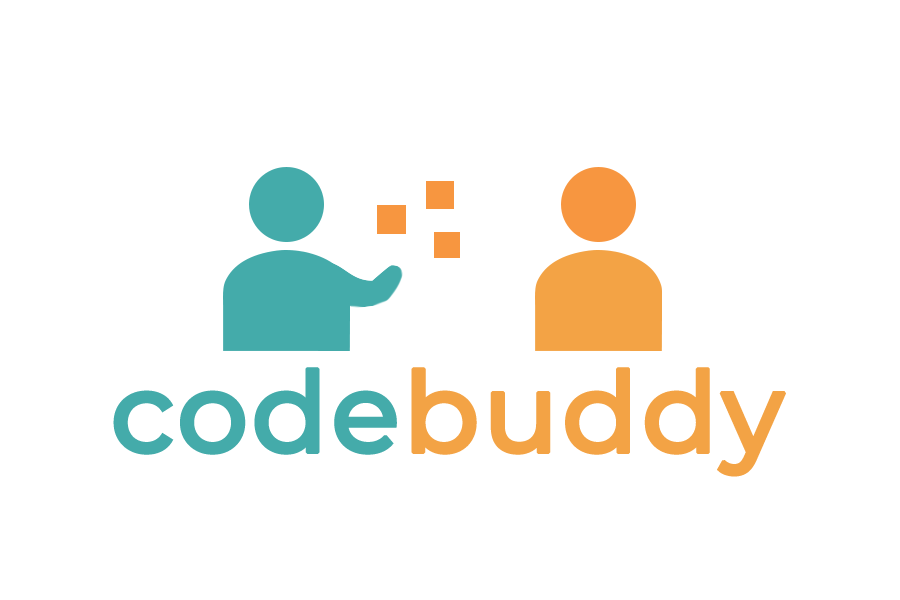
<style>
.page{position:relative;width:900px;height:600px;background:#ffffff}
.page>*{position:absolute;margin:0}
.t1{font:112.5px "Montserrat-Medium";color:#f3a345;font-weight:bold}
.t2{font:112.5px "Montserrat-Medium";color:#44abaa;font-weight:bold}
</style>
<div class="page">
<p class="t1" style="left:113px;top:367px;width:673px;height:110px"><span class="t2">code</span>buddy</p>
</div>
